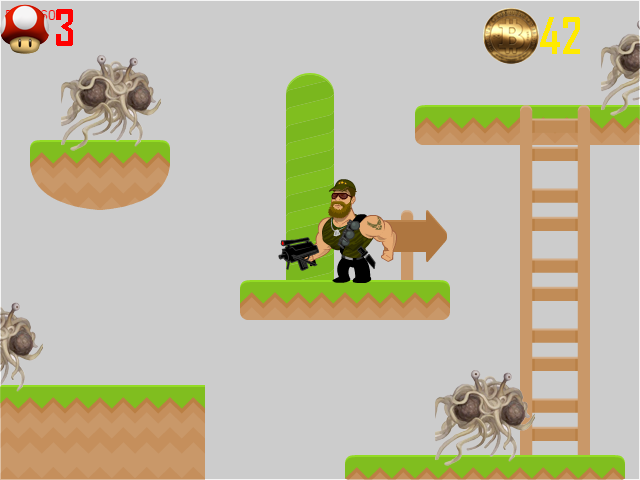
<style>
.page{position:relative;width:640px;height:480px;background:#cccccc}
.page>*{position:absolute;margin:0}
.t1{font:48px "AgencyFB-Bold";color:#ff0000}
.t2{font:48px "AgencyFB-Bold";color:#ffea00}
</style>
<div class="page">
<p class="t1" style="left:56px;top:9px;width:17px;height:37px">3</p>
<p class="t2" style="left:540px;top:17px;width:40px;height:37px">42</p>
</div>
